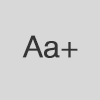
<style>
.page{position:relative;width:100px;height:100px;background:#d8d8d8}
.page>*{position:absolute;margin:0}
.t1{font:30.1px "HelveticaNeue-Light";letter-spacing:0.01em;color:#343434;font-weight:bold}
</style>
<div class="page">
<p class="t1" style="left:22px;top:35px;width:56px;height:23px">Aa+</p>
</div>
